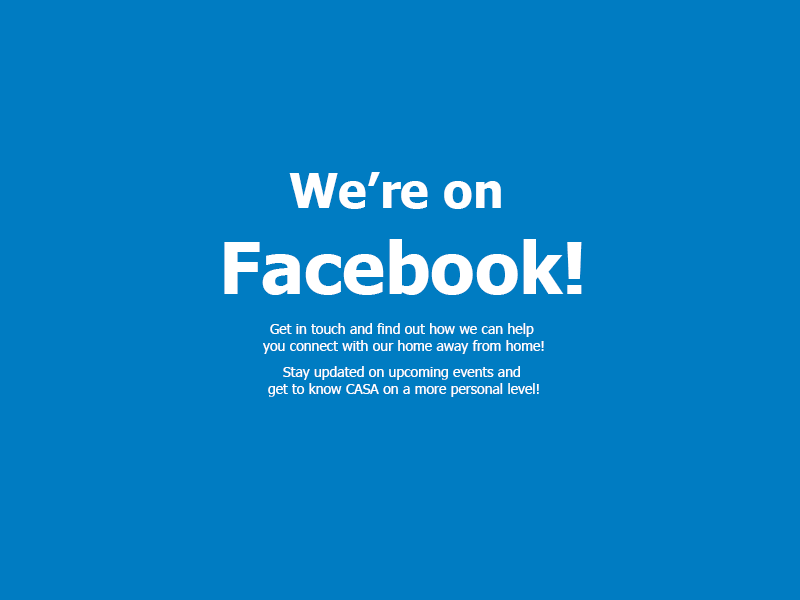
<style>
.page{position:relative;width:800px;height:600px;background:#007cc2}
.page>*{position:absolute;margin:0}
.t1{font:72px "Tahoma-Bold";color:#ffffff}
.t2{font:48px "Tahoma-Bold";color:#ffffff}
.t3{font:14px "Tahoma";color:#ffffff}
</style>
<div class="page">
<p class="t1" style="left:224px;top:172px;width:358px;height:123px;text-align:center"><span class="t2">We’re on <br></span>Facebook!</p>
<p class="t3" style="left:263px;top:323px;width:281px;height:74px;text-align:center">Get in touch and find out how we can help <br>you connect with our home away from home!<br><br>Stay updated on upcoming events and <br>get to know CASA on a more personal level!</p>
</div>
